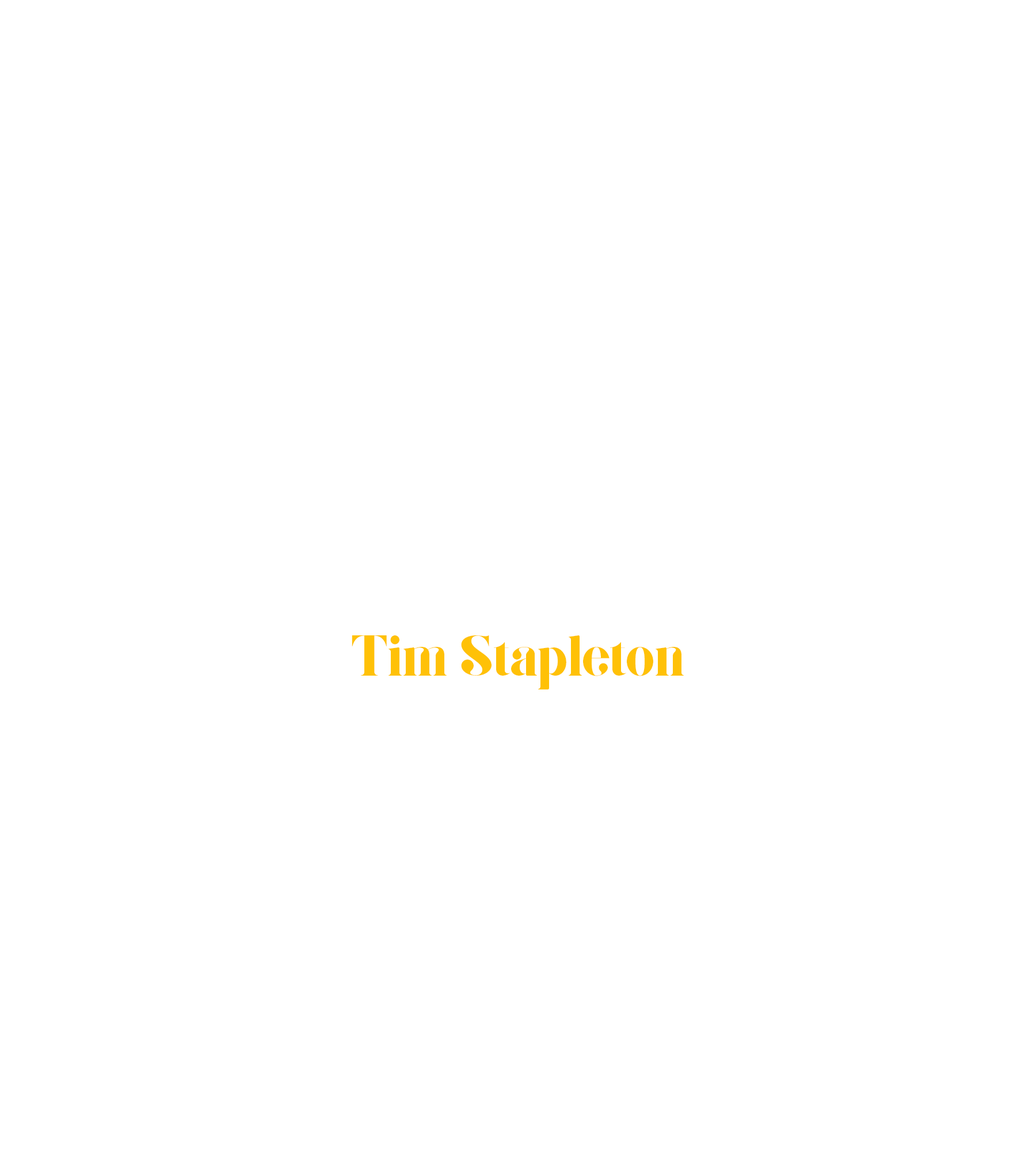
<style>
.page{position:relative;width:1036px;height:1151px;background:#ffffff}
.page>*{position:absolute;margin:0}
.t1{font:57.6px "Giza";color:#ffc107}
</style>
<div class="page">
<p class="t1" style="left:352px;top:635px;width:332px;height:54px">Tim  Stapleton</p>
</div>
